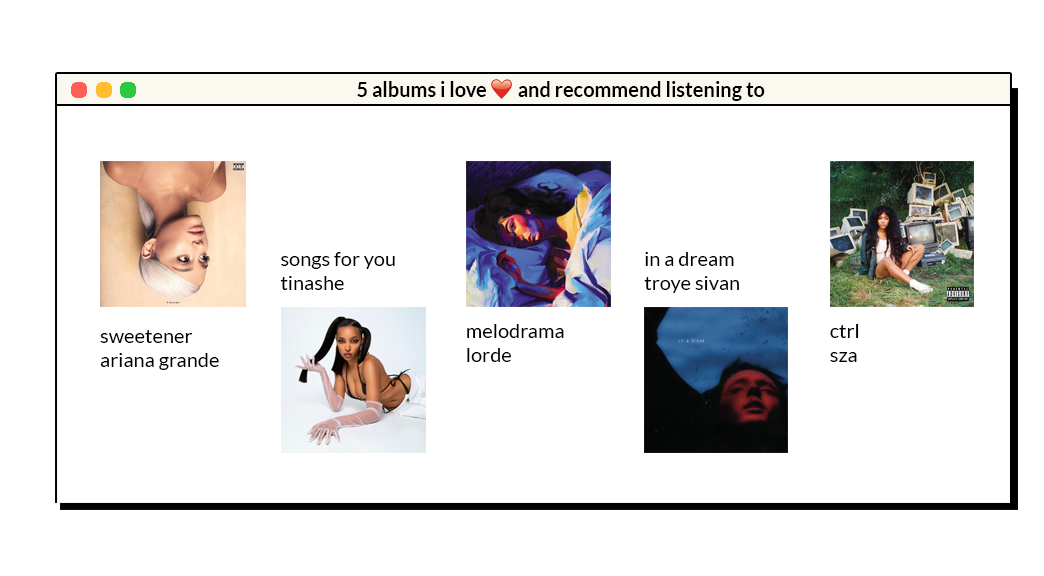
<style>
.page{position:relative;width:1044px;height:576px;background:#ffffff}
.page>*{position:absolute;margin:0}
.t1{font:20px "Lato-Bold";color:#000000}
.t2{font:20px "Lato-Regular";color:#000000}
</style>
<div class="page">
<p class="t1" style="left:357px;top:81px;width:408px;height:20px">5 albums i love        and recommend listening to</p>
<p class="t2" style="left:280px;top:252px;width:115px;height:38px">songs for you<br>tinashe</p>
<p class="t2" style="left:644px;top:252px;width:95px;height:41px">in a dream<br>troye sivan</p>
<p class="t2" style="left:467px;top:324px;width:97px;height:38px">melodrama<br>lorde</p>
<p class="t2" style="left:830px;top:324px;width:29px;height:38px">ctrl<br>sza</p>
<p class="t2" style="left:100px;top:330px;width:119px;height:40px">sweetener<br>ariana grande</p>
</div>
